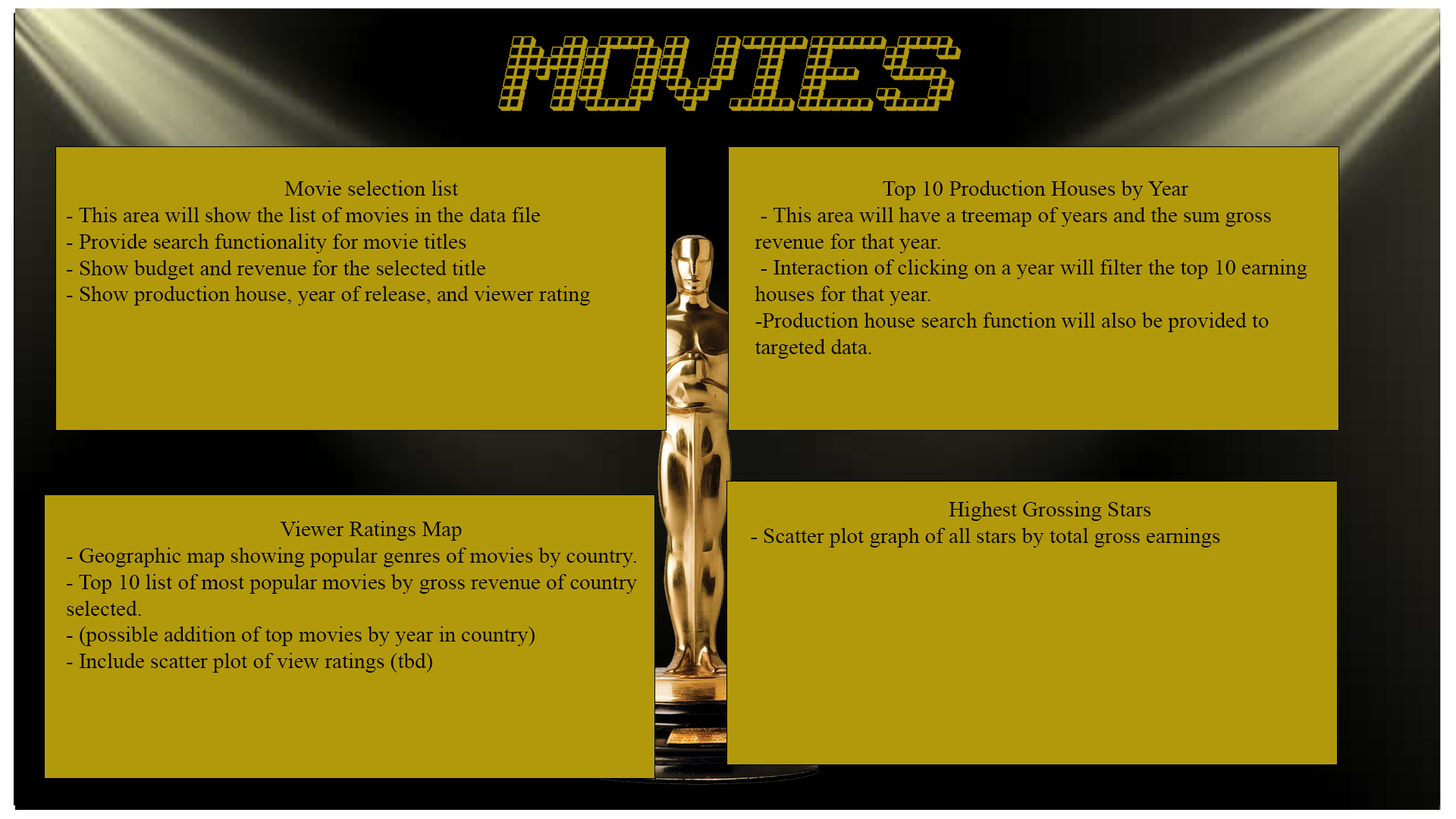
<style>
.page{position:relative;width:1456px;height:819px;background:#b2990b}
.page>*{position:absolute;margin:0}
.t1{font:69.8px "LotsOfDotz";color:#b2990b}
.t2{font:22px "TimesNewRomanPSMT";color:#000000}
</style>
<div class="page">
<p class="t1" style="left:498px;top:36px;width:464px;height:75px">MOVIES</p>
<p class="t2" style="left:67px;top:180px;width:523px;height:126px;text-align:center">Movie selection list<br>- This area will show the list of movies in the data file<br>- Provide search functionality for movie titles<br>- Show budget and revenue for the selected title<br>- Show production house, year of release, and viewer rating</p>
<p class="t2" style="left:755px;top:180px;width:552px;height:179px;text-align:center">Top 10 Production Houses by Year<br> - This area will have a treemap of years and the sum gross revenue for that year.<br> - Interaction of clicking on a year will filter the top 10 earning houses for that year.<br>-Production house search function will also be provided to targeted data.</p>
<p class="t2" style="left:751px;top:501px;width:469px;height:47px;text-align:justify">Highest Grossing Stars<br> - Scatter plot graph of all stars by total gross earnings</p>
<p class="t2" style="left:67px;top:521px;width:570px;height:152px;text-align:center">Viewer Ratings Map<br>- Geographic map showing popular genres of movies by country.<br>- Top 10 list of most popular movies by gross revenue of country selected.<br>- (possible addition of top movies by year in country)<br>- Include scatter plot of view ratings (tbd)</p>
</div>
